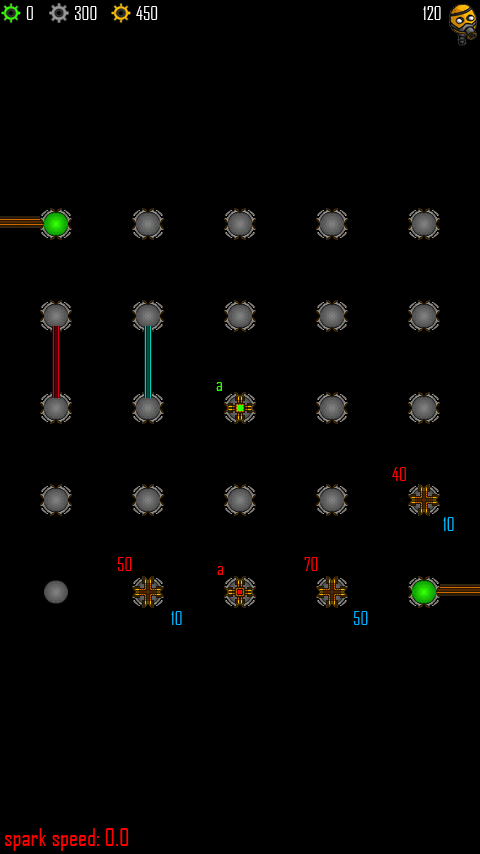
<style>
.page{position:relative;width:480px;height:854px;background:#000000}
.page>*{position:absolute;margin:0}
.t1{font:18px "AgencyFB-Reg";color:#ffffff}
.t2{font:18px "AgencyFB-Reg";color:#30ff00}
.t3{font:18px "AgencyFB-Reg";color:#ff0000}
.t4{font:18px "AgencyFB-Reg";color:#00baff}
.t5{font:18px "AgencyFB-Reg";color:#00b4ff}
.t6{font:18px "AgencyFB-Reg";color:#00aeff}
.t7{font:24px "AgencyFB-Reg";color:#ff0000}
</style>
<div class="page">
<p class="t1" style="left:26px;top:6px;width:7px;height:14px">0</p>
<p class="t1" style="left:75px;top:6px;width:22px;height:14px">300</p>
<p class="t1" style="left:136px;top:6px;width:22px;height:14px">450</p>
<p class="t1" style="left:423px;top:6px;width:18px;height:14px">120</p>
<p class="t2" style="left:216px;top:382px;width:6px;height:9px">a</p>
<p class="t3" style="left:392px;top:467px;width:14px;height:14px">40</p>
<p class="t4" style="left:443px;top:517px;width:11px;height:14px">10</p>
<p class="t3" style="left:117px;top:557px;width:15px;height:14px">50</p>
<p class="t3" style="left:304px;top:557px;width:14px;height:14px">70</p>
<p class="t3" style="left:217px;top:566px;width:6px;height:9px">a</p>
<p class="t5" style="left:171px;top:611px;width:11px;height:14px">10</p>
<p class="t6" style="left:353px;top:611px;width:15px;height:14px">50</p>
<p class="t7" style="left:5px;top:828px;width:124px;height:23px">spark speed: 0.0</p>
</div>
